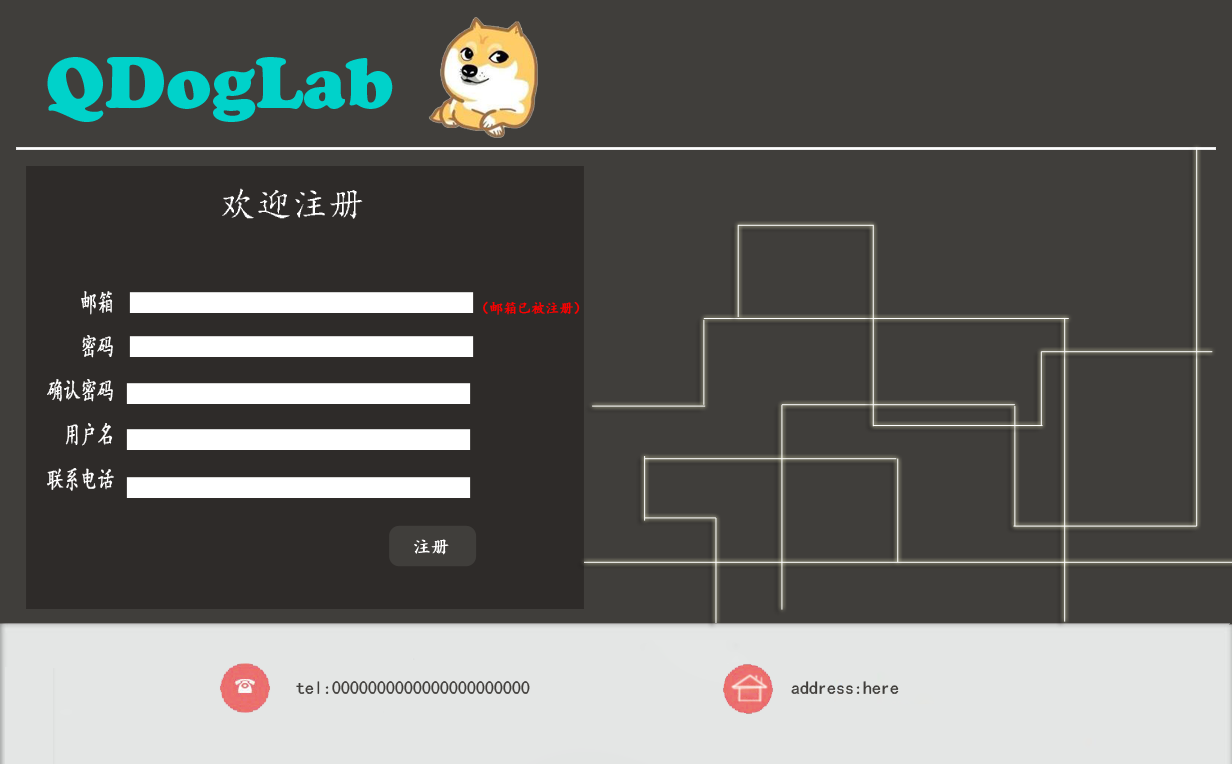
<style>
.page{position:relative;width:1232px;height:764px;background:#403e3b}
.page>*{position:absolute;margin:0}
.t1{font:72px "CooperBlackStd";color:#00d2ca}
.t2{font:36px "¿¬Ìå";color:#ffffff}
.t3{font:25.2px "¿¬Ìå";color:#ffffff;font-weight:bold;scale:0.67 1}
.t4{font:14px "¿¬Ìå";color:#ff0000;font-weight:bold}
</style>
<div class="page">
<p class="t1" style="left:47px;top:57px;width:346px;height:65px">QDogLab</p>
<p class="t2" style="left:222px;top:188px;width:141px;height:31px">欢迎注册</p>
<p class="t3" style="left:47px;top:291px;width:67px;height:200px;text-align:right">邮箱<br>密码<br>确认密码<br>用户名<br>联系电话</p>
<p class="t4" style="left:483px;top:301px;width:97px;height:14px">（邮箱已被注册）</p>
</div>
